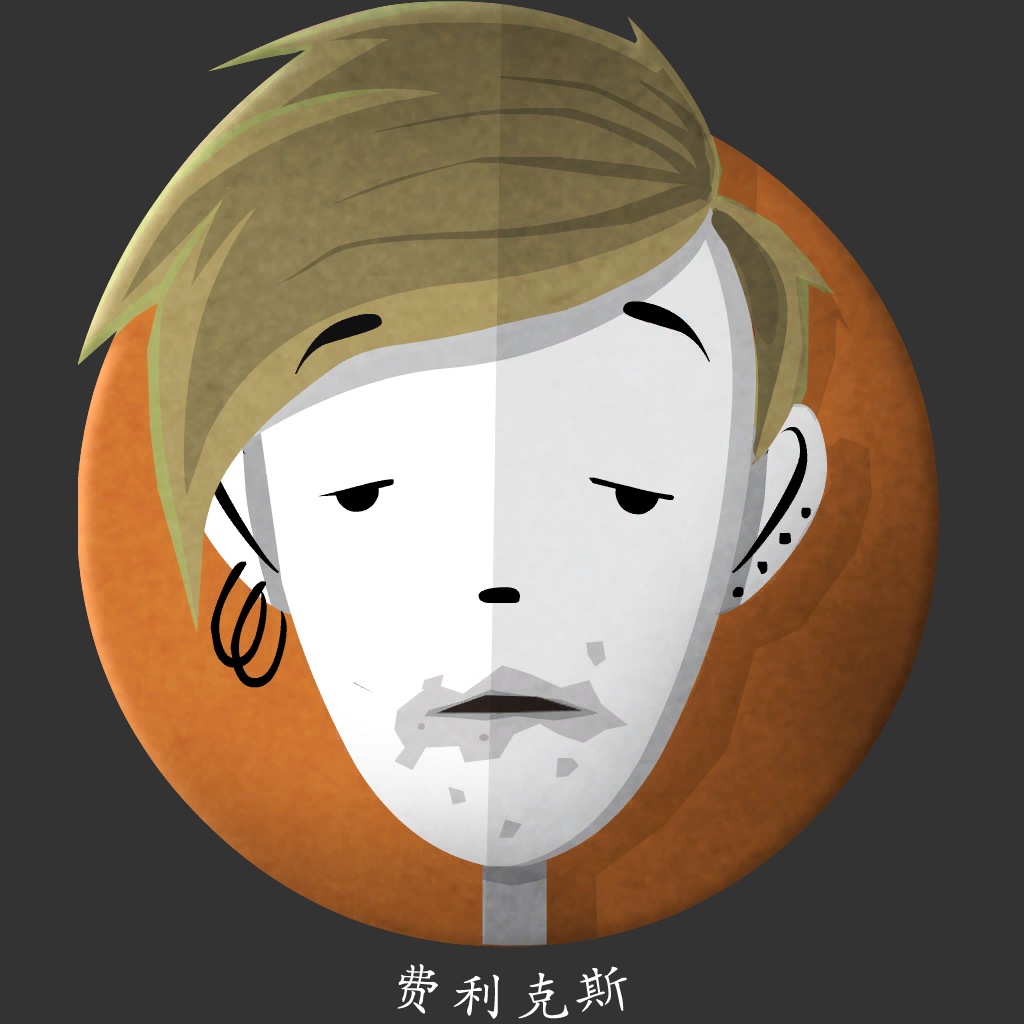
<style>
.page{position:relative;width:1024px;height:1024px;background:#333333}
.page>*{position:absolute;margin:0}
.t1{font:53.3px "STKaiti";letter-spacing:0.1em;color:#ffffff}
</style>
<div class="page">
<p class="t1" style="left:397px;top:964px;width:230px;height:55px">费利克斯</p>
</div>
